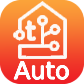
<style>
.page{position:relative;width:84px;height:84px}
.page>*{position:absolute;margin:0}
.t1{font:24px "OCRAStd";color:#ffffff}
</style>
<div class="page">
<p class="t1" style="left:13px;top:61px;width:56px;height:19px">Auto</p>
</div>
